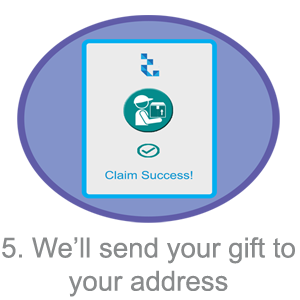
<style>
.page{position:relative;width:300px;height:300px;background:#ffffff}
.page>*{position:absolute;margin:0}
.t1{font:27.7px "ArialMT";color:#898b8c}
</style>
<div class="page">
<p class="t1" style="left:2px;top:237px;width:293px;height:60px;text-align:center">5. We’ll send your gift to your address</p>
</div>
